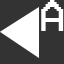
<style>
.page{position:relative;width:64px;height:64px;background:#333333}
.page>*{position:absolute;margin:0}
.t1{font:44.7px "VCROSDMono";color:#ffffff;text-transform:uppercase}
</style>
<div class="page">
<p class="t1" style="left:41px;top:0px;width:23px;height:31px">A</p>
</div>
